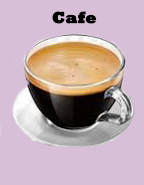
<style>
.page{position:relative;width:144px;height:185px;background:#d8bfd8}
.page>*{position:absolute;margin:0}
.t1{font:16px "Rockwell-ExtraBold";color:#000000;font-weight:bold}
</style>
<div class="page">
<p class="t1" style="left:52px;top:11px;width:45px;height:13px">Cafe</p>
</div>
